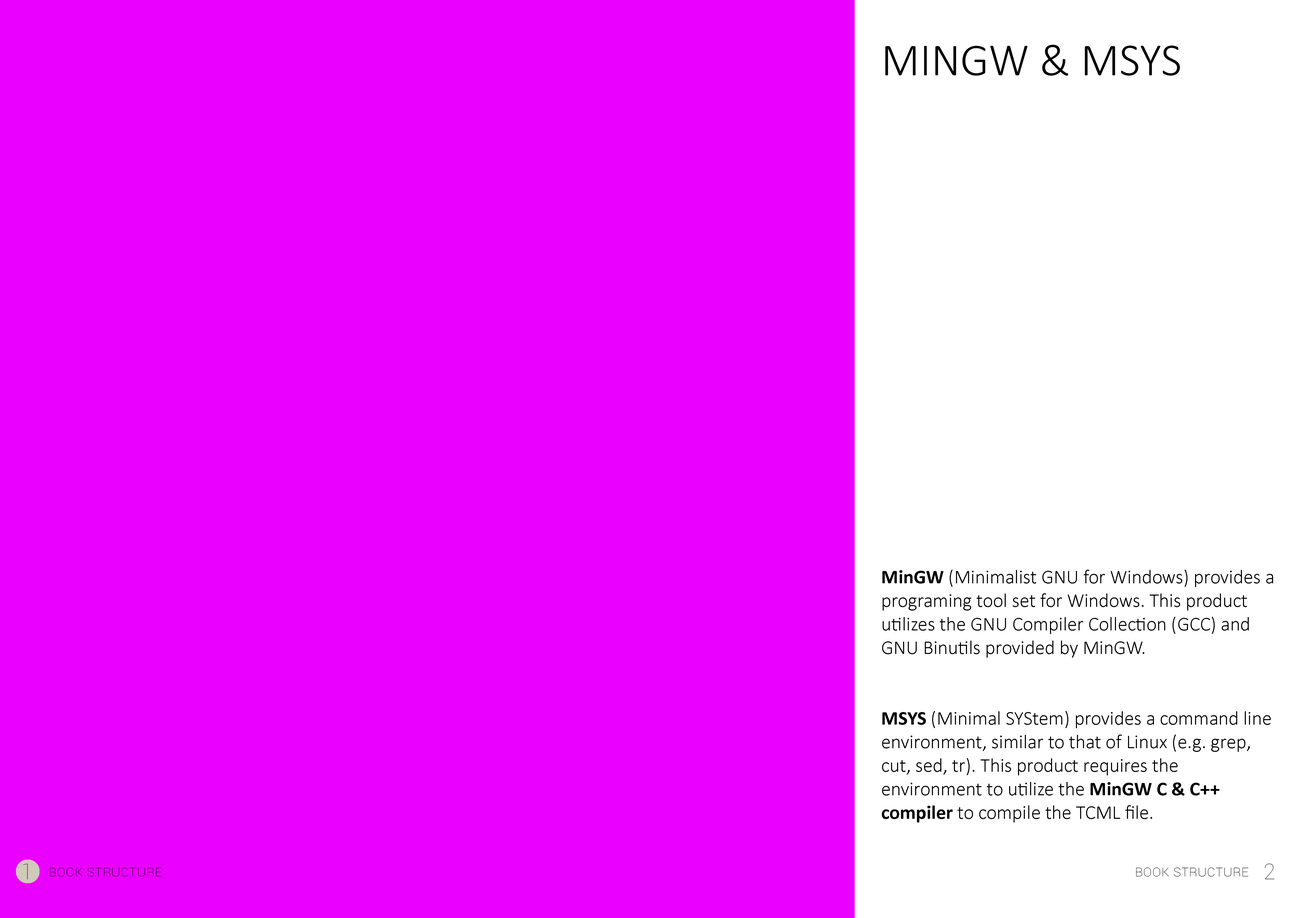
<style>
.page{position:relative;width:1299px;height:918px;background:#ea00ff}
.page>*{position:absolute;margin:0}
.t1{font:45.8px "Calibri-Light";color:#000000;text-transform:uppercase}
.t2{font:19.6px "Calibri-Light";color:#000000}
.t3{font:19.6px "Calibri-Bold";color:#000000}
.t4{font:21.8px "Roboto-Thin";color:#484848}
.t5{font:15.3px "Roboto-Thin";color:#000000;font-variant:small-caps}
</style>
<div class="page">
<p class="t1" style="left:885px;top:45px;width:295px;height:31px">Mingw &amp; msys</p>
<p class="t2" style="left:882px;top:570px;width:391px;height:253px"><span class="t3">MinGW</span> (Minimalist GNU for Windows) provides a programing tool set for Windows. This product utilizes the GNU Compiler Collection (GCC) and GNU Binutils provided by MinGW.<br><br><br><span class="t3">MSYS</span> (Minimal SYStem) provides a command line environment, similar to that of Linux (e.g. grep, cut, sed, tr). This product requires the environment to utilize the <span class="t3">MinGW C &amp; C++ compiler </span>to compile the TCML file.</p>
<p class="t4" style="left:23px;top:864px;width:5px;height:16px">1</p>
<p class="t5" style="left:50px;top:868px;width:112px;height:9px">Book structure</p>
<p class="t5" style="left:1136px;top:868px;width:112px;height:9px">Book structure</p>
<p class="t4" style="left:1264px;top:864px;width:10px;height:16px">2</p>
</div>
